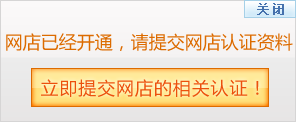
<style>
.page{position:relative;width:296px;height:122px}
.page>*{position:absolute;margin:0}
.t1{font:12px "SimSun";letter-spacing:0.2em;color:#4571ad;font-weight:bold}
.t2{font:18px "MicrosoftYaHei";color:#dc6b00}
.t3{font:18px "MicrosoftYaHei";letter-spacing:0.05em;color:#ec510d}
</style>
<div class="page">
<p class="t1" style="left:257px;top:3px;width:27px;height:12px">关闭</p>
<p class="t2" style="left:6px;top:33px;width:287px;height:18px">网店已经开通，请提交网店认证资料</p>
<p class="t3" style="left:41px;top:79px;width:218px;height:18px">立即提交网店的相关认证！</p>
</div>
